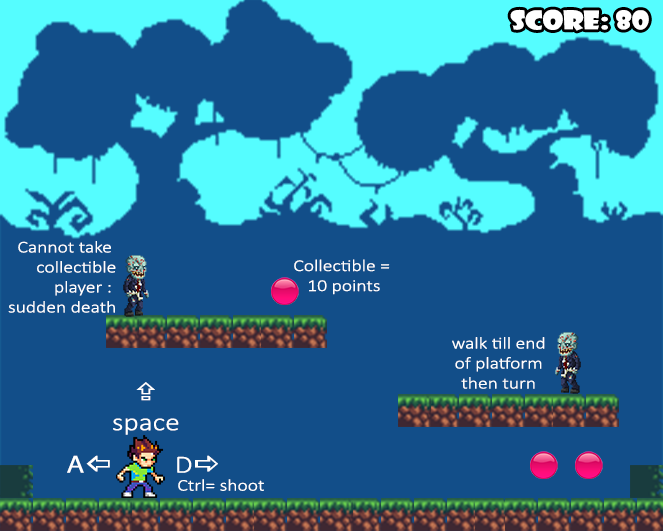
<style>
.page{position:relative;width:663px;height:531px;background:#124e89}
.page>*{position:absolute;margin:0}
.t1{font:25px "ShowcardGothic-Reg";color:#ffffff;scale:1.18 1}
.t2{font:16.7px "Calibri-Light";color:#ffffff;scale:1.18 1}
.t3{font:25px "Calibri-Light";color:#ffffff;scale:1.18 1}
.t4{font:25px "Wingdings3";color:#ffffff;scale:1.18 1}
.t5{font:25px "MyriadPro-Regular";color:#ffffff;scale:1.18 1}
</style>
<div class="page">
<p class="t1" style="left:510px;top:9px;width:139px;height:22px">SCORE: 80</p>
<p class="t2" style="left:8px;top:241px;width:108px;height:72px;text-align:right">Cannot take <br>collectible<br>player : <br>sudden death</p>
<p class="t2" style="left:294px;top:259px;width:96px;height:36px;text-align:center">Collectible = <br>10 points</p>
<p class="t2" style="left:452px;top:337px;width:93px;height:52px;text-align:center">walk till end<br>of platform<br>then turn</p>
<p class="t3" style="left:113px;top:382px;width:66px;height:53px;text-align:center"><span class="t4">X<br></span>space</p>
<p class="t5" style="left:67px;top:455px;width:43px;height:18px">A<span class="t4">^</span></p>
<p class="t3" style="left:177px;top:455px;width:41px;height:18px">D<span class="t4">a</span></p>
<p class="t2" style="left:178px;top:479px;width:86px;height:12px">Ctrl= shoot</p>
</div>
